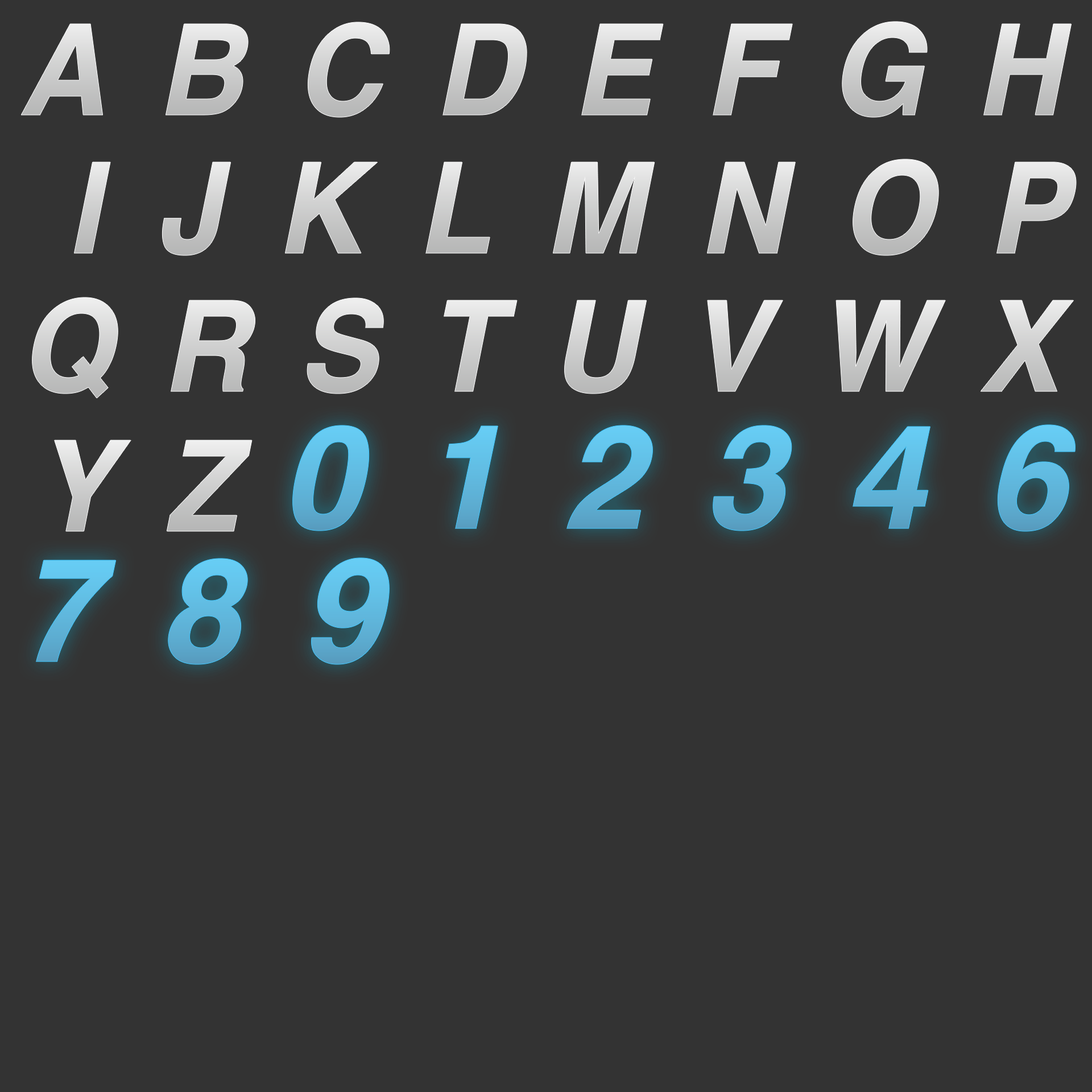
<style>
.page{position:relative;width:1092px;height:1092px;background:#333333}
.page>*{position:absolute;margin:0}
.t1{font:126.3px "Helvetica-BoldOblique";letter-spacing:0.44em;scale:0.94 1}
.t2{font:126.3px "Helvetica-BoldOblique";letter-spacing:0.46em;color:#cecfcf;scale:0.94 1}
.t3{font:126.3px "Helvetica-BoldOblique";letter-spacing:0.42em;scale:0.94 1}
.t4{font:144.5px "Helvetica-BoldOblique";letter-spacing:0.42em;color:#60b9df}
.t5{font:144.5px "Helvetica-BoldOblique";letter-spacing:0.42em;color:#60bbe1}
</style>
<div class="page">
<p class="t1" style="left:21px;top:22px;width:1051px;height:95px">ABCDEFGH</p>
<p class="t2" style="left:74px;top:159px;width:1002px;height:96px">IJKLMNOP</p>
<p class="t3" style="left:32px;top:297px;width:1042px;height:101px">QRSTUVWX</p>
<p class="t4" style="left:292px;top:425px;width:783px;height:106px">012346</p>
<p class="t3" style="left:54px;top:440px;width:198px;height:91px">YZ</p>
<p class="t5" style="left:36px;top:558px;width:354px;height:106px">789</p>
</div>
